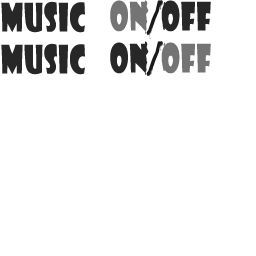
<style>
.page{position:relative;width:256px;height:256px;background:#ffffff}
.page>*{position:absolute;margin:0}
.t1{font:38px "ShowcardGothic-Reg";letter-spacing:0.04em;color:#272727;scale:0.7 1}
.t2{font:38px "ShowcardGothic-Reg";letter-spacing:0.04em;color:#747474;scale:0.7 1}
</style>
<div class="page">
<p class="t1" style="left:1px;top:1px;width:84px;height:32px">mUSIC</p>
<p class="t2" style="left:110px;top:0px;width:36px;height:32px">ON</p>
<p class="t1" style="left:161px;top:0px;width:50px;height:32px">off</p>
<p class="t1" style="left:1px;top:43px;width:84px;height:32px">mUSIC</p>
<p class="t1" style="left:110px;top:42px;width:36px;height:32px">ON</p>
<p class="t2" style="left:161px;top:42px;width:50px;height:32px">off</p>
</div>
